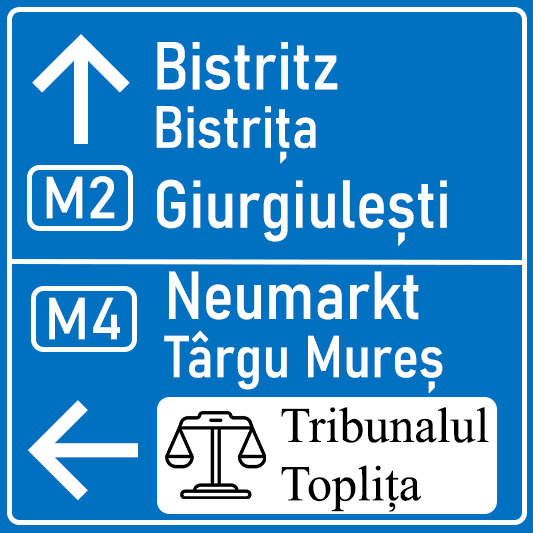
<style>
.page{position:relative;width:533px;height:533px;background:#0070c0}
.page>*{position:absolute;margin:0}
.t1{font:150px "Inter-Medium";color:#ffffff}
.t2{font:66.7px "Bahnschrift-SemiCondensed";color:#ffffff}
.t3{font:66.7px/58.3px "Bahnschrift-SemiCondensed";color:#ffffff}
.t4{font:58.3px/58.3px "Bahnschrift-SemiCondensed";color:#ffffff}
.t5{font:58.3px "Bahnschrift";color:#ffffff}
.t6{font:50px/58.3px "TimesNewRomanPSMT";color:#000000}
</style>
<div class="page">
<p class="t1" style="left:32px;top:34px;width:98px;height:110px">↑</p>
<p class="t2" style="left:156px;top:42px;width:291px;height:204px"><span class="t3">Bistritz<br></span><span class="t4">Bistrița<br></span>Giurgiulești</p>
<p class="t5" style="left:46px;top:176px;width:69px;height:43px">M2</p>
<p class="t4" style="left:164px;top:271px;width:279px;height:123px"><span class="t3">Neumarkt<br></span>Târgu Mureș</p>
<p class="t5" style="left:49px;top:297px;width:71px;height:43px">M4</p>
<p class="t1" style="left:28px;top:400px;width:110px;height:100px">←</p>
<p class="t6" style="left:281px;top:407px;width:208px;height:105px">Tribunalul<br>Toplița</p>
</div>
